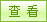
<style>
.page{position:relative;width:47px;height:22px}
.page>*{position:absolute;margin:0}
.t1{font:12px "SimSun";color:#5e9311}
</style>
<div class="page">
<p class="t1" style="left:9px;top:5px;width:29px;height:12px">查 看</p>
</div>
